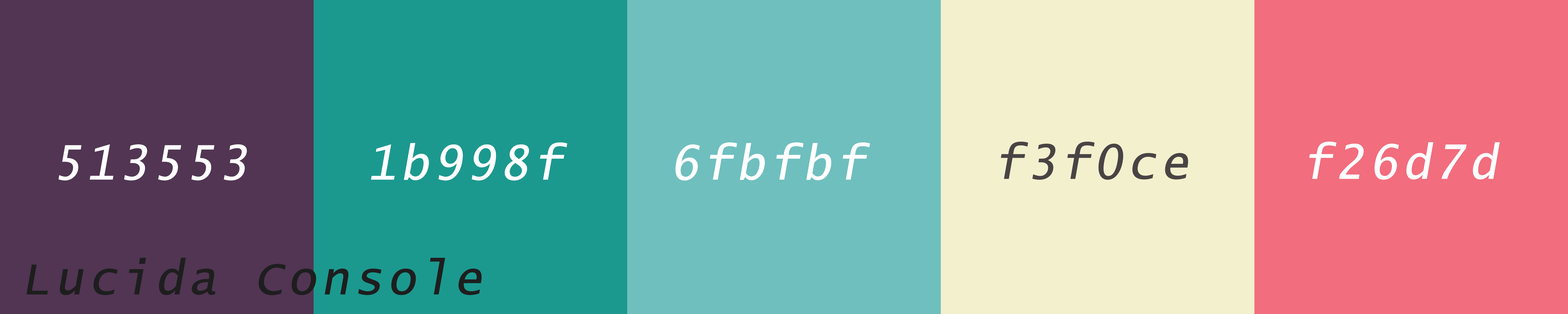
<style>
.page{position:relative;width:1568px;height:314px}
.page>*{position:absolute;margin:0}
.t1{font:47px "LucidaConsole";letter-spacing:0.075em;color:#fefefe;font-weight:bold;font-style:italic}
.t2{font:47px "LucidaConsole";letter-spacing:0.075em;color:#ffffff;font-weight:bold;font-style:italic}
.t3{font:47px "LucidaConsole";letter-spacing:0.075em;color:#484343;font-weight:bold;font-style:italic}
.t4{font:47px "LucidaConsole";letter-spacing:0.075em;color:#1f1f1f;font-weight:bold;font-style:italic}
</style>
<div class="page">
<p class="t1" style="left:58px;top:144px;width:189px;height:36px">513553</p>
<p class="t2" style="left:371px;top:142px;width:196px;height:38px">1b998f</p>
<p class="t2" style="left:675px;top:142px;width:195px;height:38px">6fbfbf</p>
<p class="t3" style="left:1001px;top:141px;width:187px;height:39px">f3f0ce</p>
<p class="t1" style="left:1309px;top:141px;width:191px;height:39px">f26d7d</p>
<p class="t4" style="left:26px;top:257px;width:456px;height:38px">Lucida Console</p>
</div>
